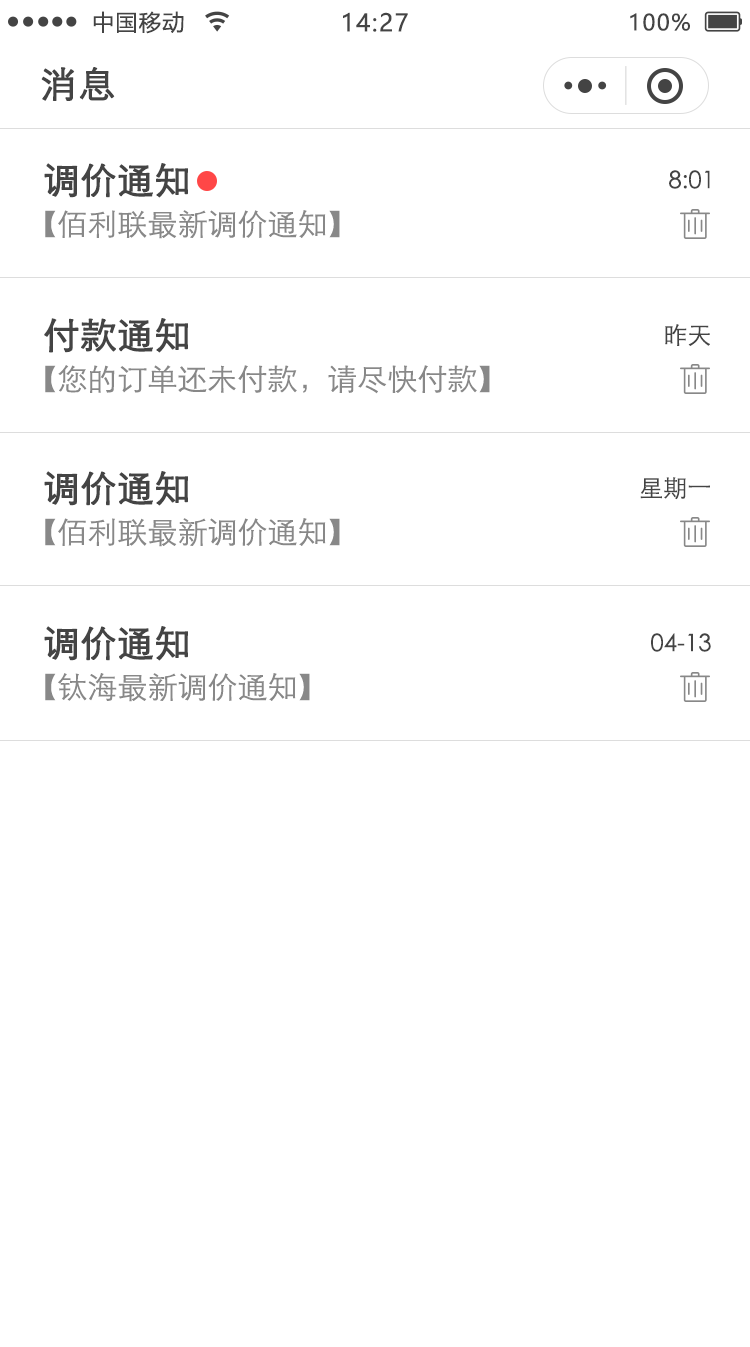
<style>
.page{position:relative;width:750px;height:1347px;background:#ffffff}
.page>*{position:absolute;margin:0}
.t1{font:22px "MicrosoftYaHei";letter-spacing:0.06em;color:#444444}
.t2{font:24px "MicrosoftYaHei";letter-spacing:0.06em;color:#444444}
.t3{font:36px "STXihei";letter-spacing:0.06em;color:#444444;font-weight:bold}
.t4{font:36px "STXihei";color:#444444;font-weight:bold}
.t5{font:24px "STXihei";color:#444444}
.t6{font:30px "STXihei";color:#888888}
</style>
<div class="page">
<p class="t1" style="left:93px;top:11px;width:91px;height:23px">中国移动</p>
<p class="t2" style="left:343px;top:12px;width:65px;height:20px">14:27</p>
<p class="t1" style="left:630px;top:13px;width:60px;height:18px">100%</p>
<p class="t3" style="left:41px;top:67px;width:74px;height:34px">消息</p>
<p class="t4" style="left:44px;top:163px;width:144px;height:35px">调价通知</p>
<p class="t5" style="left:669px;top:170px;width:41px;height:19px">8:01</p>
<p class="t6" style="left:45px;top:210px;width:295px;height:29px">【佰利联最新调价通知】</p>
<p class="t4" style="left:44px;top:318px;width:144px;height:35px">付款通知</p>
<p class="t5" style="left:665px;top:324px;width:45px;height:22px">昨天</p>
<p class="t6" style="left:45px;top:365px;width:445px;height:29px">【您的订单还未付款，请尽快付款】</p>
<p class="t4" style="left:44px;top:471px;width:144px;height:35px">调价通知</p>
<p class="t5" style="left:640px;top:477px;width:70px;height:23px">星期一</p>
<p class="t6" style="left:45px;top:518px;width:295px;height:29px">【佰利联最新调价通知】</p>
<p class="t4" style="left:44px;top:626px;width:144px;height:35px">调价通知</p>
<p class="t5" style="left:651px;top:633px;width:60px;height:19px">04-13</p>
<p class="t6" style="left:45px;top:673px;width:265px;height:29px">【钛海最新调价通知】</p>
</div>
